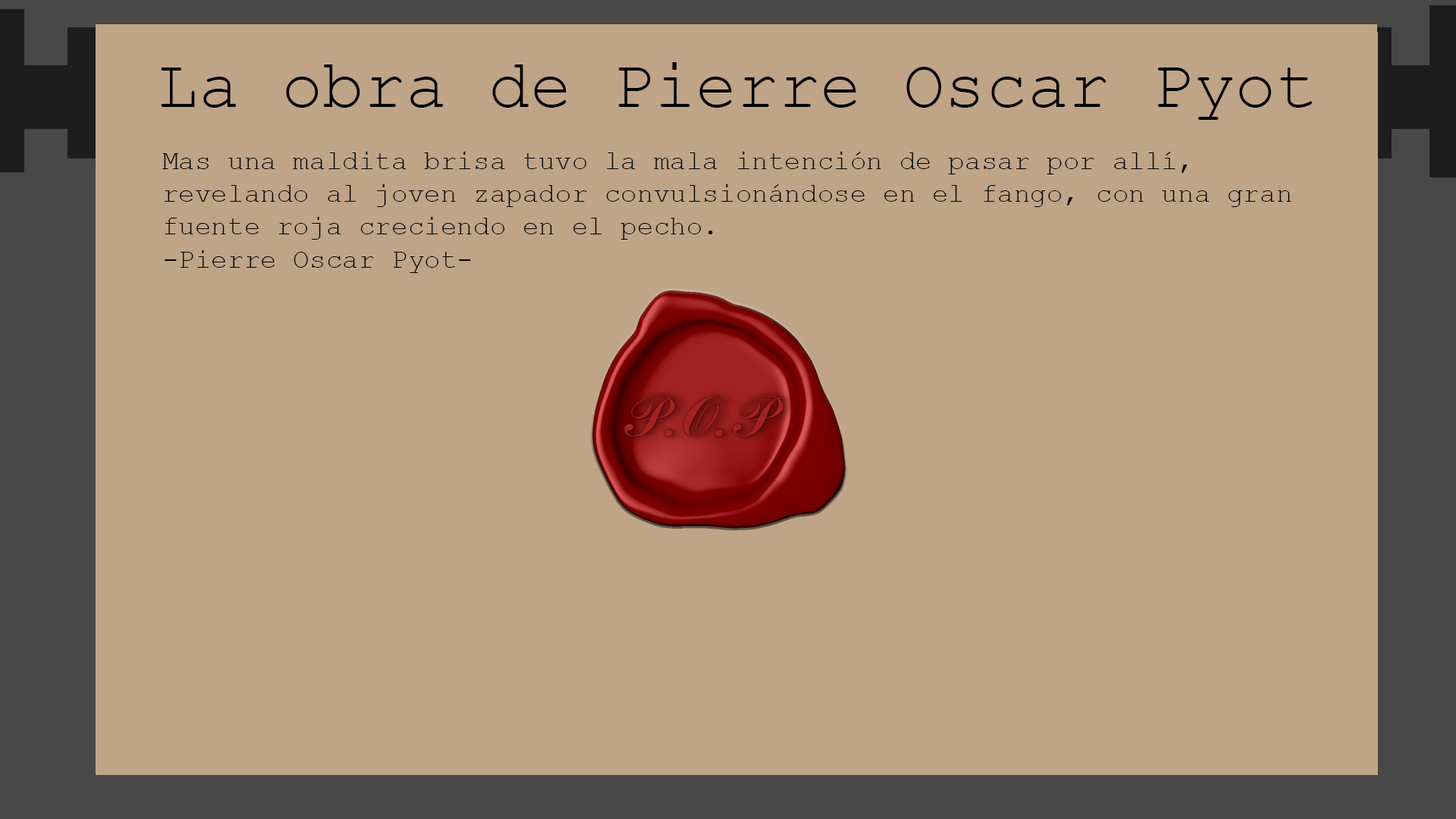
<style>
.page{position:relative;width:1456px;height:819px;background:#bfa488}
.page>*{position:absolute;margin:0}
.t1{font:69.1px "CourierNewPSMT";color:#000000}
.t2{font:27.3px "CourierNewPSMT";color:#000000}
</style>
<div class="page">
<p class="t1" style="left:161px;top:62px;width:1152px;height:58px">La obra de Pierre Oscar Pyot</p>
<p class="t2" style="left:162px;top:152px;width:1129px;height:121px">Mas una maldita brisa tuvo la mala intención de pasar por allí, <br>revelando al joven zapador convulsionándose en el fango, con una gran <br>fuente roja creciendo en el pecho. <br>-Pierre Oscar Pyot-</p>
</div>
